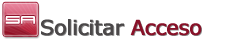
<style>
.page{position:relative;width:250px;height:40px;background:#ffffff}
.page>*{position:absolute;margin:0}
.t1{font:16px "911Porscha";color:#ffffff}
.t2{font:20.8px "Verdana";letter-spacing:-0.025em;font-weight:bold}
.t3{font:20.8px "Verdana";letter-spacing:-0.025em;color:#4b4848;font-weight:bold}
.t4{font:20.8px "Verdana";letter-spacing:-0.025em;color:#881811;font-weight:bold}
</style>
<div class="page">
<p class="t1" style="left:5px;top:16px;width:30px;height:8px">SA</p>
<p class="t2" style="left:41px;top:19px;width:161px;height:17px">Solicitar Acceso</p>
<p class="t3" style="left:41px;top:19px;width:161px;height:17px">Solicitar <span class="t4">Acceso</span></p>
</div>
